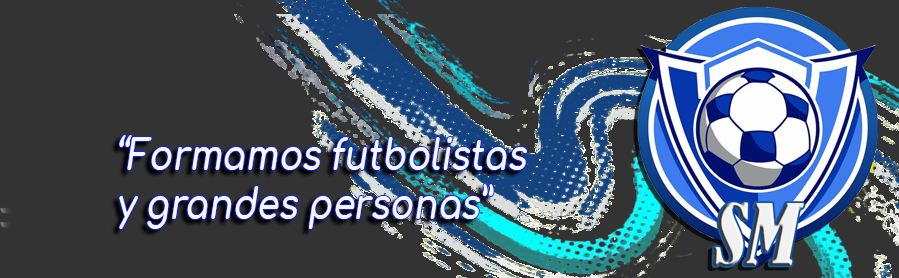
<style>
.page{position:relative;width:899px;height:278px;background:#333333}
.page>*{position:absolute;margin:0}
.t1{font:40.9px "Comfortaa-Bold";color:#f7f9f9;font-style:italic;scale:0.85 1}
</style>
<div class="page">
<p class="t1" style="left:119px;top:135px;width:408px;height:94px">“Formamos futbolistas <br>y grandes personas”</p>
</div>
